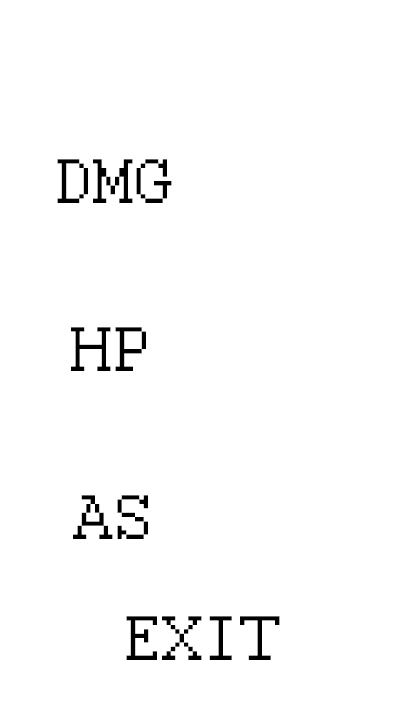
<style>
.page{position:relative;width:405px;height:720px;background:#ffffff}
.page>*{position:absolute;margin:0}
.t1{font:70px "Courier";color:#000000}
</style>
<div class="page">
<p class="t1" style="left:57px;top:159px;width:115px;height:44px">DMG</p>
<p class="t1" style="left:71px;top:327px;width:75px;height:44px">HP</p>
<p class="t1" style="left:73px;top:495px;width:75px;height:44px">AS</p>
<p class="t1" style="left:126px;top:616px;width:154px;height:44px">EXIT</p>
</div>
